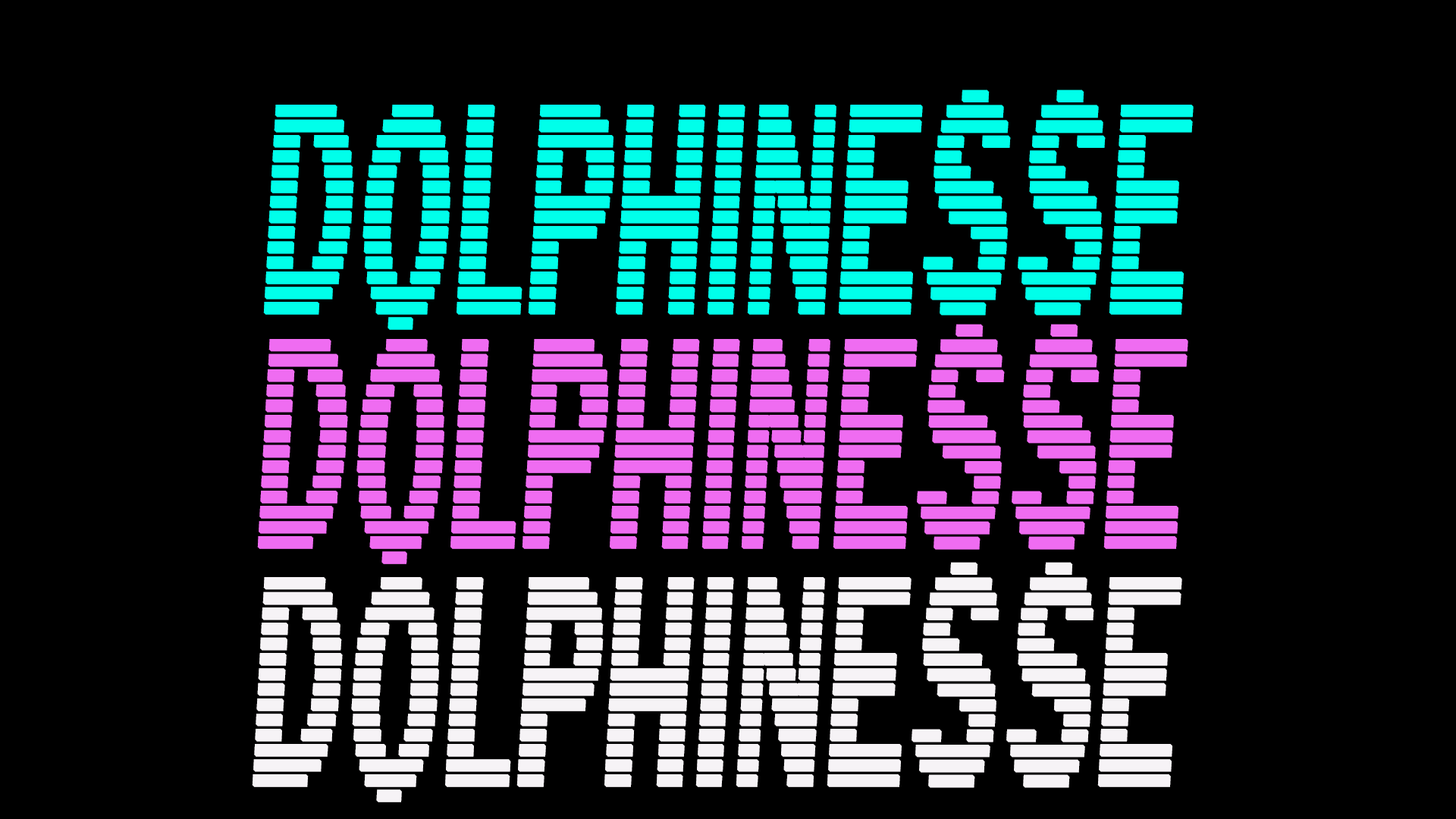
<style>
.page{position:relative;width:1456px;height:819px;background:#000000}
.page>*{position:absolute;margin:0}
.t1{font:325.4px "LinearBeam05";letter-spacing:0.025em;color:#00ffea;text-transform:uppercase;font-weight:bold;scale:0.36 1}
.t2{font:325.4px "LinearBeam05";letter-spacing:0.025em;color:#ef6cf1;text-transform:uppercase;font-weight:bold;scale:0.36 1}
.t3{font:325.4px "LinearBeam05";letter-spacing:0.025em;color:#f6f3f6;text-transform:uppercase;font-weight:bold;scale:0.36 1}
</style>
<div class="page">
<p class="t1" style="left:263px;top:89px;width:931px;height:241px">DOLPHINESSE</p>
<p class="t2" style="left:257px;top:324px;width:931px;height:240px">DOLPHINESSE</p>
<p class="t3" style="left:252px;top:562px;width:930px;height:240px">DOLPHINESSE</p>
</div>
